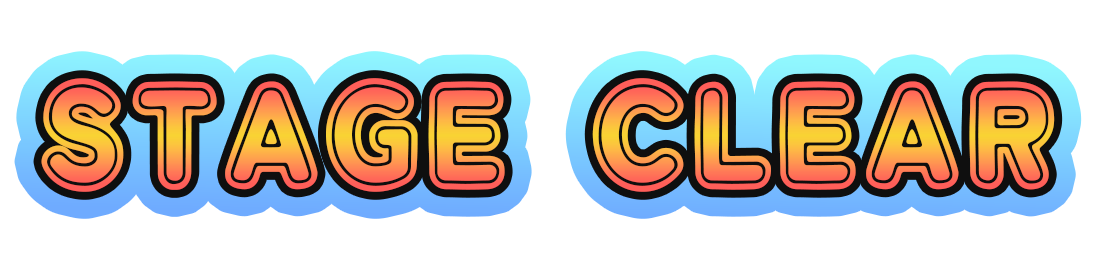
<style>
.page{position:relative;width:1099px;height:272px;background:#ffffff}
.page>*{position:absolute;margin:0}
.t1{font:150px "DokiDokiFantasia";letter-spacing:0.02em}
</style>
<div class="page">
<p class="t1" style="left:41px;top:78px;width:1014px;height:114px">STAGE CLEAR</p>
</div>
